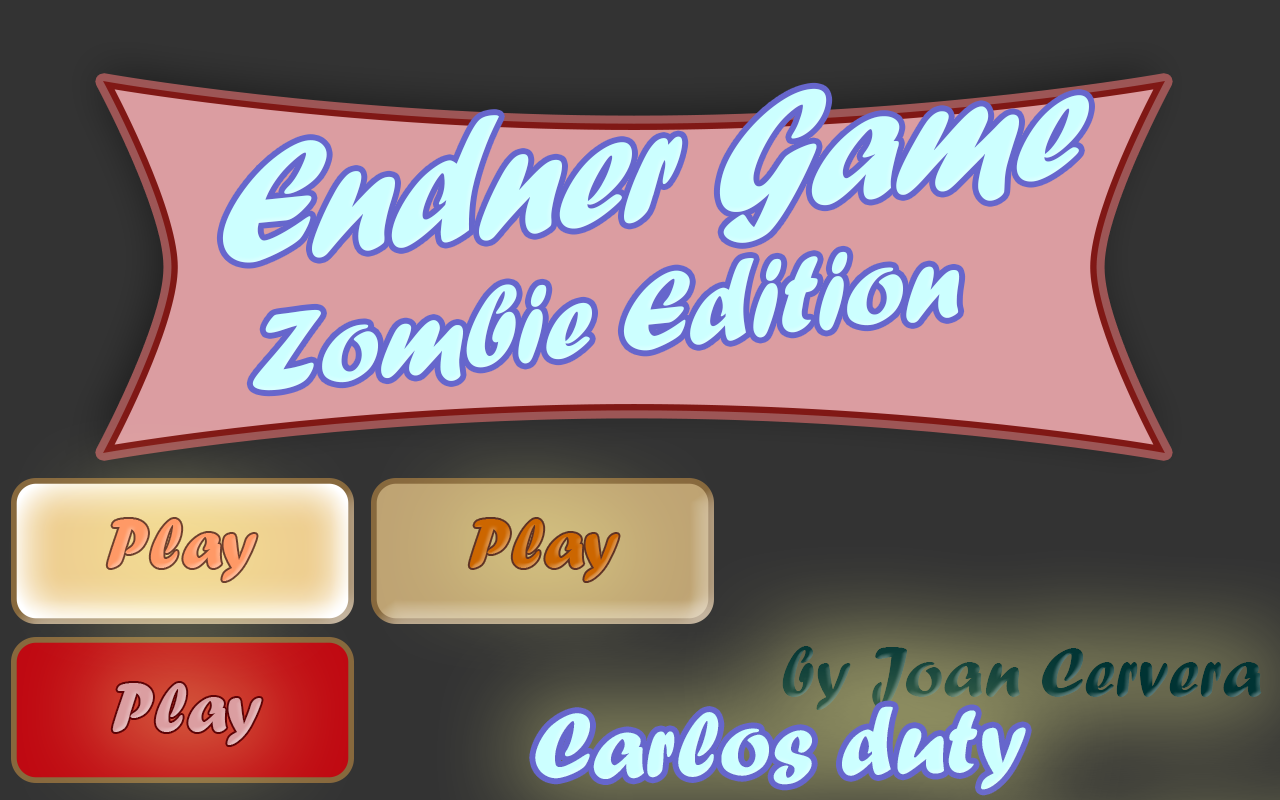
<style>
.page{position:relative;width:1280px;height:800px;background:#333333}
.page>*{position:absolute;margin:0}
.t1{font:180.3px "ForteMT";color:#ccffff;scale:0.86 1}
.t2{font:114.3px "ForteMT";color:#ccffff}
.t3{font:72px "ForteMT";color:#ff9966}
.t4{font:72px "ForteMT";color:#cc6600}
.t5{font:72px "ForteMT"}
.t6{font:72px "ForteMT";color:#db9ea1}
.t7{font:95.8px "ForteMT";color:#ccffff}
</style>
<div class="page">
<p class="t1" style="left:222px;top:88px;width:867px;height:175px;rotate:-6deg">Endner Game</p>
<p class="t2" style="left:252px;top:251px;width:708px;height:140px;rotate:-6deg">Zombie Edition</p>
<p class="t3" style="left:107px;top:519px;width:150px;height:62px">Play</p>
<p class="t4" style="left:469px;top:519px;width:150px;height:62px">Play</p>
<p class="t5" style="left:782px;top:646px;width:480px;height:64px">by Joan Cervera</p>
<p class="t6" style="left:112px;top:683px;width:150px;height:62px">Play</p>
<p class="t7" style="left:535px;top:706px;width:491px;height:84px;rotate:-1deg">Carlos duty</p>
</div>
